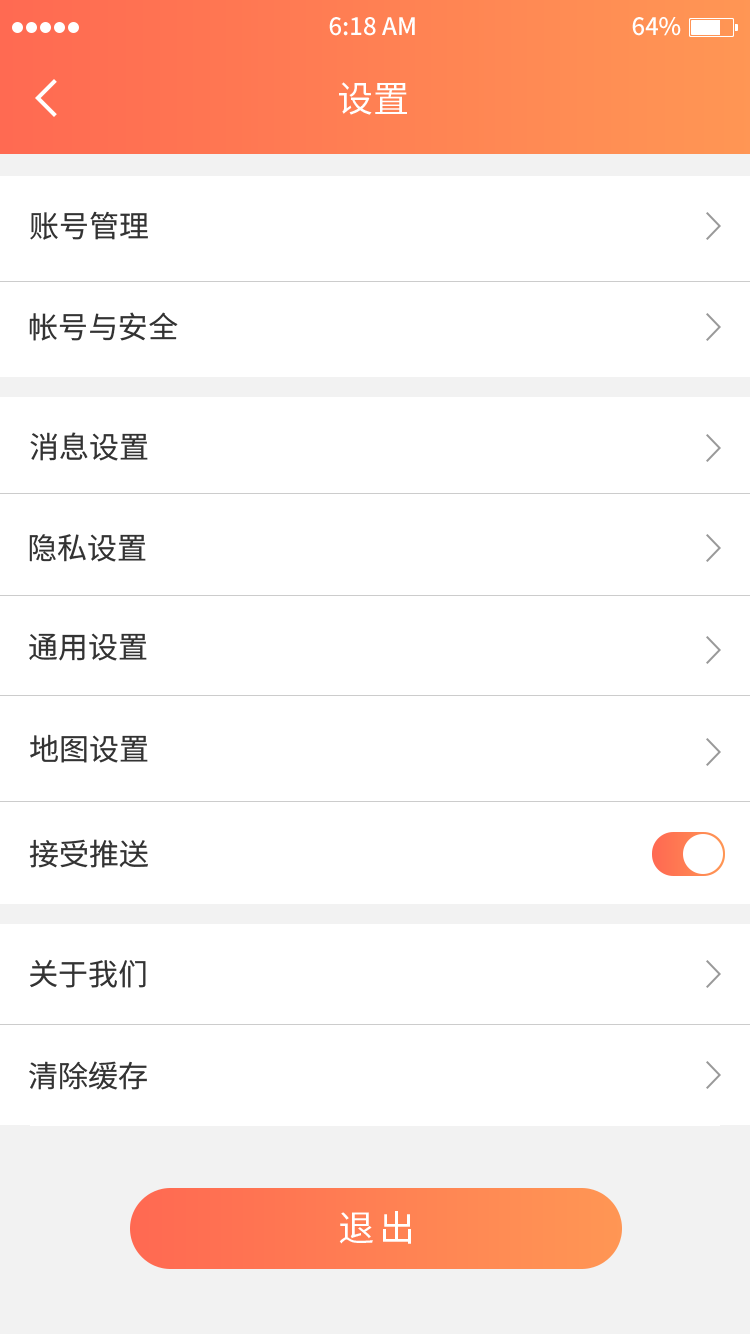
<style>
.page{position:relative;width:750px;height:1334px;background:#ffffff}
.page>*{position:absolute;margin:0}
.t1{font:36px "NotoSansHans-Regular";color:#ffffff}
.t2{font:30px "NotoSansHans-Regular";color:#333333}
.t3{font:36px "NotoSansHans-Regular";letter-spacing:0.14em;color:#ffffff}
</style>
<div class="page">
<p class="t1" style="left:339px;top:82px;width:68px;height:33px">设置</p>
<p class="t2" style="left:30px;top:211px;width:118px;height:29px">账号管理</p>
<p class="t2" style="left:29px;top:312px;width:149px;height:29px">帐号与安全</p>
<p class="t2" style="left:30px;top:432px;width:118px;height:29px">消息设置</p>
<p class="t2" style="left:29px;top:534px;width:117px;height:28px">隐私设置</p>
<p class="t2" style="left:29px;top:633px;width:118px;height:28px">通用设置</p>
<p class="t2" style="left:30px;top:734px;width:118px;height:29px">地图设置</p>
<p class="t2" style="left:29px;top:839px;width:119px;height:29px">接受推送</p>
<p class="t2" style="left:30px;top:959px;width:116px;height:29px">关于我们</p>
<p class="t2" style="left:29px;top:1061px;width:118px;height:29px">清除缓存</p>
<p class="t3" style="left:339px;top:1211px;width:72px;height:33px">退出</p>
</div>
